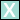
<style>
.page{position:relative;width:20px;height:20px;background:#a3dcd3}
.page>*{position:absolute;margin:0}
.t1{font:30px "Calibri";color:#ffffff}
</style>
<div class="page">
<p class="t1" style="left:3px;top:3px;width:13px;height:14px">x</p>
</div>
